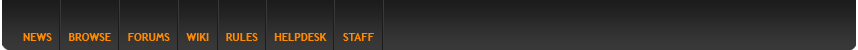
<style>
.page{position:relative;width:858px;height:50px}
.page>*{position:absolute;margin:0}
.t1{font:11px "TrebuchetMS-Bold";color:#ff8a00}
</style>
<div class="page">
<p class="t1" style="left:23px;top:33px;width:351px;height:8px">NEWS     BROWSE     FORUMS     WIKI     RULES     HELPDESK     STAFF</p>
</div>
